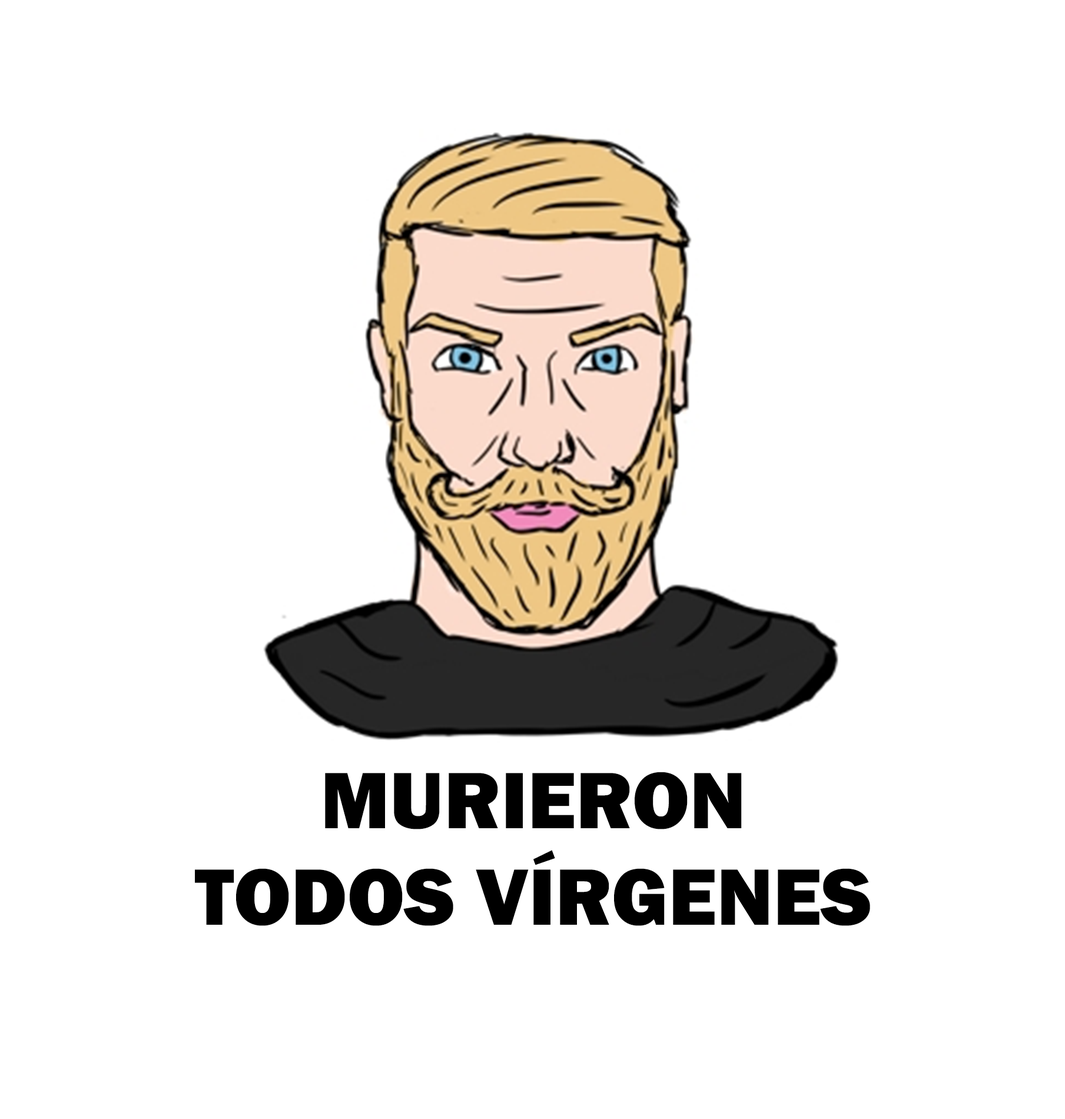
<style>
.page{position:relative;width:1065px;height:1119px;background:#ffffff}
.page>*{position:absolute;margin:0}
.t1{font:82.8px "FranklinGothic-Heavy";color:#000000}
</style>
<div class="page">
<p class="t1" style="left:195px;top:772px;width:675px;height:154px;text-align:center">MURIERON<br>TODOS VÍRGENES</p>
</div>
